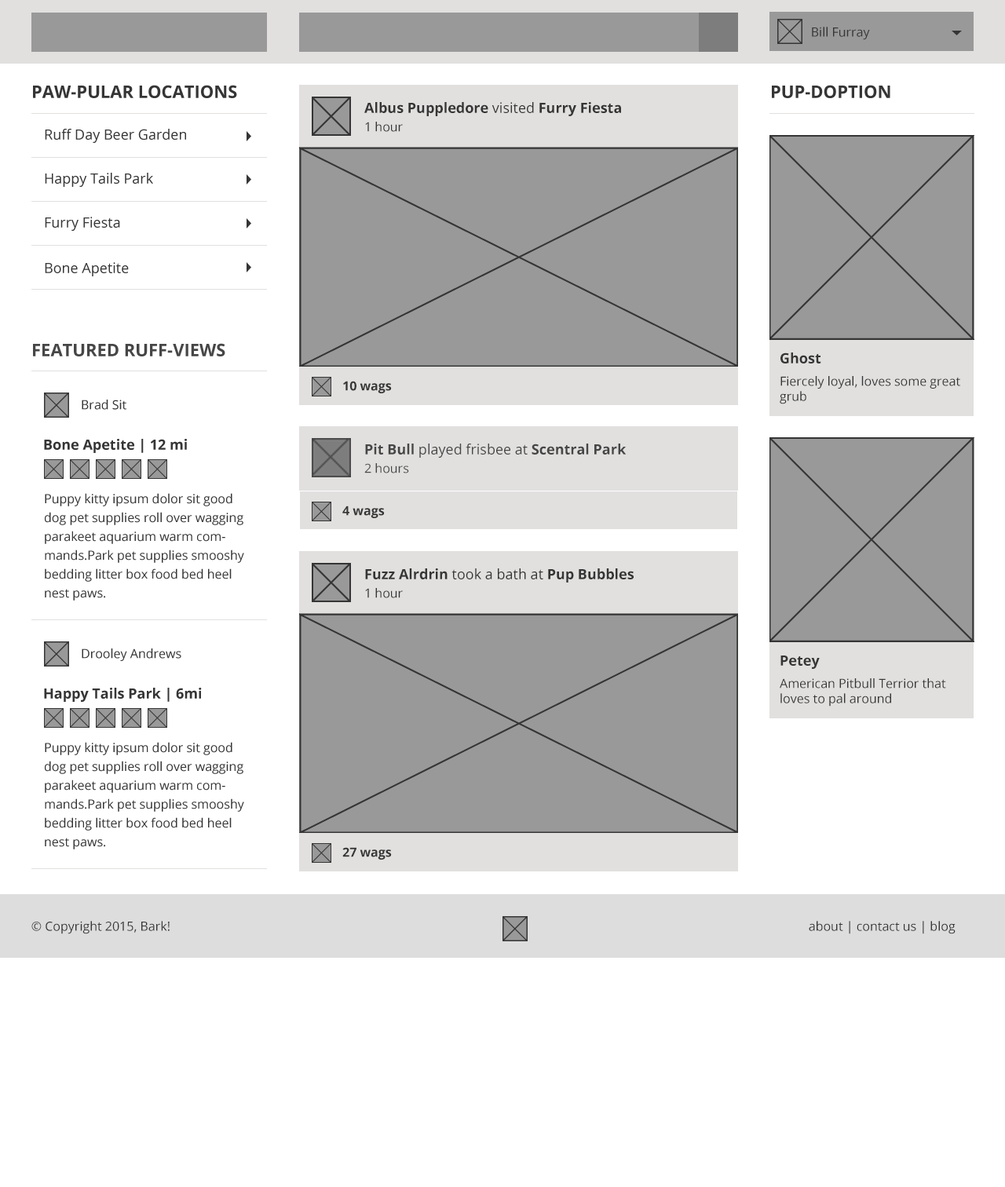
<style>
.page{position:relative;width:1005px;height:1187px;background:#ffffff}
.page>*{position:absolute;margin:0}
.t1{font:12.6px "OpenSans";color:#343534}
.t2{font:17.3px "OpenSans-Bold";color:#343534}
.t3{font:14.1px "OpenSans-Bold";color:#343534}
.t4{font:14.1px "OpenSans";color:#343534}
.t5{font:17.3px "OpenSans-Bold";color:#464646}
.t6{font:12.6px "OpenSans-Bold";color:#343534}
.t7{font:14.1px "OpenSans";color:#464646}
.t8{font:14.1px "OpenSans-Bold";color:#464646}
.t9{font:12.6px "OpenSans";color:#464646}
.t10{font:12.6px/18.8px "OpenSans";color:#343534}
</style>
<div class="page">
<p class="t1" style="left:812px;top:27px;width:58px;height:13px">Bill Furray</p>
<p class="t2" style="left:33px;top:85px;width:204px;height:13px">PAW-PULAR LOCATIONS</p>
<p class="t2" style="left:772px;top:85px;width:118px;height:13px">PUP-DOPTION</p>
<p class="t3" style="left:364px;top:102px;width:257px;height:14px">Albus Puppledore<span class="t4"> visited </span>Furry Fiesta</p>
<p class="t1" style="left:365px;top:122px;width:38px;height:10px">1 hour</p>
<p class="t4" style="left:45px;top:129px;width:141px;height:14px">Ruff Day Beer Garden</p>
<p class="t4" style="left:45px;top:173px;width:108px;height:14px">Happy Tails Park</p>
<p class="t4" style="left:45px;top:217px;width:75px;height:14px">Furry Fiesta</p>
<p class="t4" style="left:45px;top:262px;width:84px;height:14px">Bone Apetite</p>
<p class="t5" style="left:33px;top:343px;width:192px;height:13px">FEATURED RUFF-VIEWS</p>
<p class="t3" style="left:780px;top:352px;width:41px;height:11px">Ghost</p>
<p class="t1" style="left:779px;top:376px;width:181px;height:28px">Fiercely loyal, loves some great grub</p>
<p class="t6" style="left:343px;top:381px;width:49px;height:12px">10 wags</p>
<p class="t1" style="left:82px;top:400px;width:44px;height:10px">Brad Sit</p>
<p class="t3" style="left:44px;top:439px;width:143px;height:14px">Bone Apetite | 12 mi</p>
<p class="t7" style="left:365px;top:443px;width:261px;height:15px"><span class="t8">Pit Bull</span> played frisbee at <span class="t8">Scentral Park</span></p>
<p class="t9" style="left:364px;top:463px;width:45px;height:10px">2 hours</p>
<p class="t10" style="left:45px;top:493px;width:199px;height:107px">Puppy kitty ipsum dolor sit good dog pet supplies roll over wagging parakeet aquarium warm commands.Park pet supplies smooshy bedding litter box food bed heel nest paws.</p>
<p class="t6" style="left:342px;top:506px;width:43px;height:12px">4 wags</p>
<p class="t4" style="left:365px;top:568px;width:268px;height:14px"><span class="t3">Fuzz Alrdrin</span> took a bath at <span class="t3">Pup Bubbles</span></p>
<p class="t1" style="left:365px;top:588px;width:38px;height:10px">1 hour</p>
<p class="t1" style="left:82px;top:648px;width:99px;height:13px">Drooley Andrews</p>
<p class="t3" style="left:780px;top:655px;width:39px;height:14px">Petey</p>
<p class="t3" style="left:44px;top:688px;width:158px;height:14px">Happy Tails Park | 6mi</p>
<p class="t1" style="left:779px;top:678px;width:167px;height:28px">American Pitbull Terrior that loves to pal around</p>
<p class="t10" style="left:45px;top:742px;width:199px;height:107px">Puppy kitty ipsum dolor sit good dog pet supplies roll over wagging parakeet aquarium warm commands.Park pet supplies smooshy bedding litter box food bed heel nest paws.</p>
<p class="t6" style="left:342px;top:847px;width:50px;height:13px">27 wags</p>
<p class="t1" style="left:31px;top:921px;width:139px;height:13px">© Copyright 2015, Bark!</p>
<p class="t1" style="left:808px;top:921px;width:147px;height:13px">about | contact us | blog</p>
</div>
